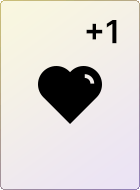
<style>
.page{position:relative;width:140px;height:190px}
.page>*{position:absolute;margin:0}
.t1{font:32px "Inter-SemiBold";color:#000000}
</style>
<div class="page">
<p class="t1" style="left:86px;top:20px;width:31px;height:24px">+1</p>
</div>
